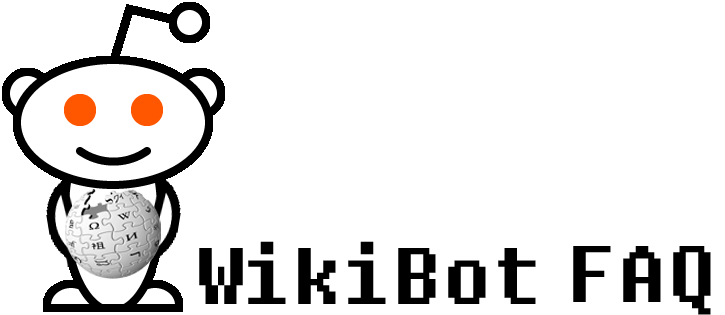
<style>
.page{position:relative;width:725px;height:315px;background:#ffffff}
.page>*{position:absolute;margin:0}
.t1{font:79.7px "Fixedsys";color:#000000}
</style>
<div class="page">
<p class="t1" style="left:199px;top:241px;width:337px;height:63px">WikiBot</p>
<p class="t1" style="left:573px;top:246px;width:138px;height:69px">FAQ</p>
</div>
